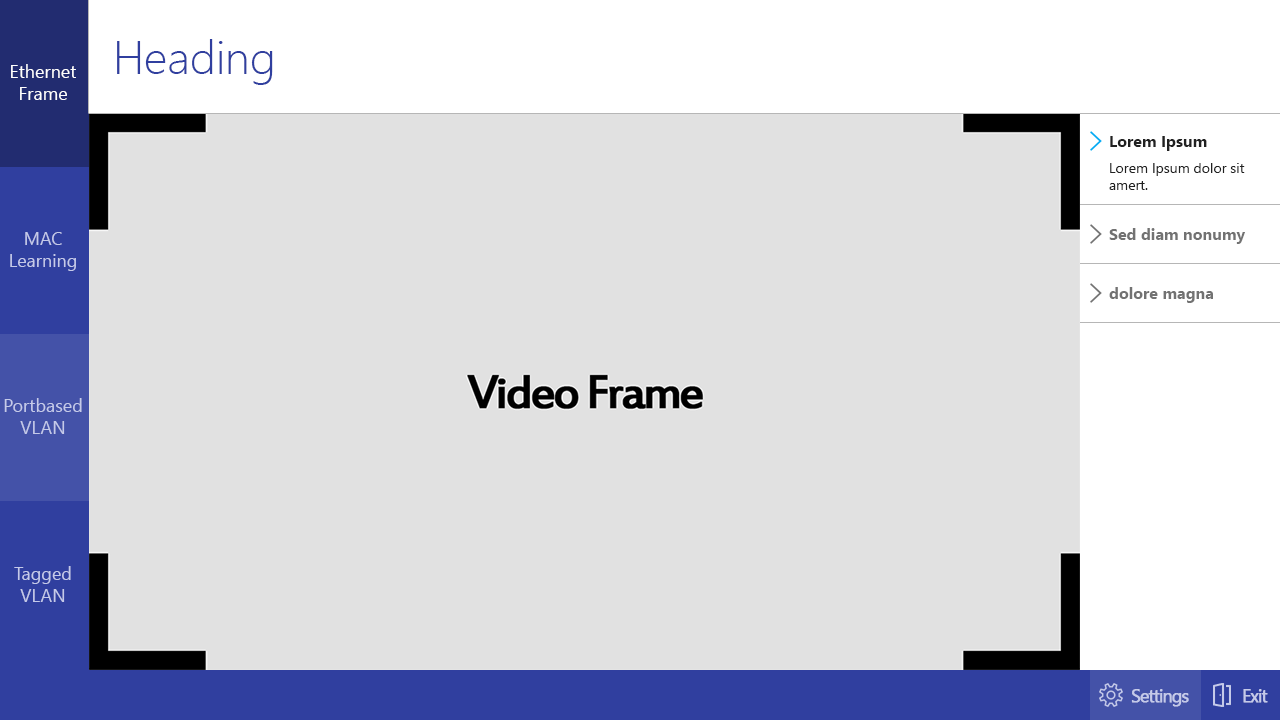
<style>
.page{position:relative;width:1280px;height:720px;background:#e1e1e1}
.page>*{position:absolute;margin:0}
.t1{font:46px "SegoeUI-Light";color:#303f9f}
.t2{font:18px "SegoeUI";color:#ffffff}
.t3{font:16px "SegoeUI-Bold";color:#212121}
.t4{font:14px "SegoeUI";color:#212121}
.t5{font:18px "SegoeUI";color:#c5cae9}
.t6{font:16px "SegoeUI-Bold";color:#727272}
.t7{font:18px "SegoeUI";letter-spacing:-0.075em;color:#c5cae9;font-weight:bold}
</style>
<div class="page">
<p class="t1" style="left:117px;top:39px;width:156px;height:46px">Heading</p>
<p class="t2" style="left:11px;top:64px;width:65px;height:36px;text-align:center">Ethernet<br>Frame</p>
<p class="t3" style="left:1110px;top:136px;width:97px;height:15px">Lorem Ipsum</p>
<p class="t4" style="left:1109px;top:163px;width:136px;height:27px">Lorem Ipsum dolor sit<br>amert.</p>
<p class="t5" style="left:10px;top:232px;width:66px;height:39px;text-align:center">MAC<br>Learning</p>
<p class="t6" style="left:1109px;top:228px;width:136px;height:16px">Sed diam nonumy</p>
<p class="t6" style="left:1109px;top:287px;width:104px;height:16px">dolore magna</p>
<p class="t5" style="left:4px;top:398px;width:78px;height:36px;text-align:center">Portbased<br>VLAN</p>
<p class="t5" style="left:14px;top:566px;width:57px;height:36px;text-align:center">Tagged<br>VLAN</p>
<p class="t7" style="left:1131px;top:689px;width:58px;height:18px">Settings</p>
<p class="t7" style="left:1243px;top:689px;width:25px;height:14px">Exit</p>
</div>
